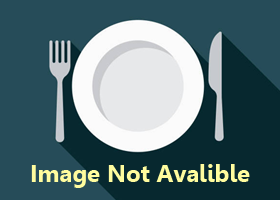
<style>
.page{position:relative;width:280px;height:200px;background:#264c59}
.page>*{position:absolute;margin:0}
.t1{font:24px "Gisha-Bold";color:#fffc9e}
</style>
<div class="page">
<p class="t1" style="left:31px;top:164px;width:219px;height:24px">Image Not Avalible</p>
</div>
